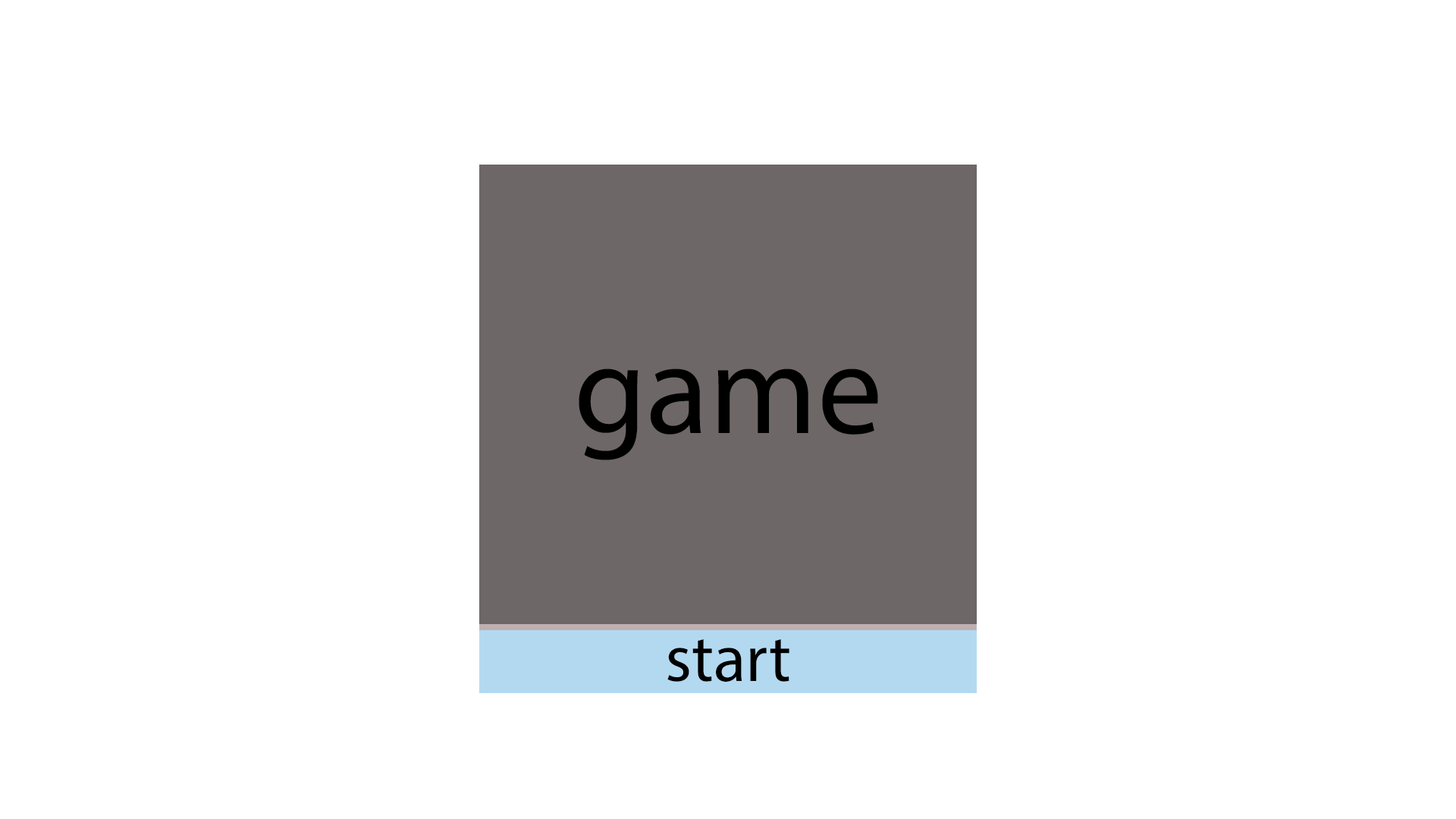
<style>
.page{position:relative;width:1456px;height:819px;background:#ffffff}
.page>*{position:absolute;margin:0}
.t1{font:129.7px "MyriadPro-Regular";color:#000000}
.t2{font:66.9px "MyriadPro-Regular";color:#000000}
</style>
<div class="page">
<p class="t1" style="left:579px;top:369px;width:299px;height:91px">game</p>
<p class="t2" style="left:667px;top:639px;width:122px;height:43px">start</p>
</div>
